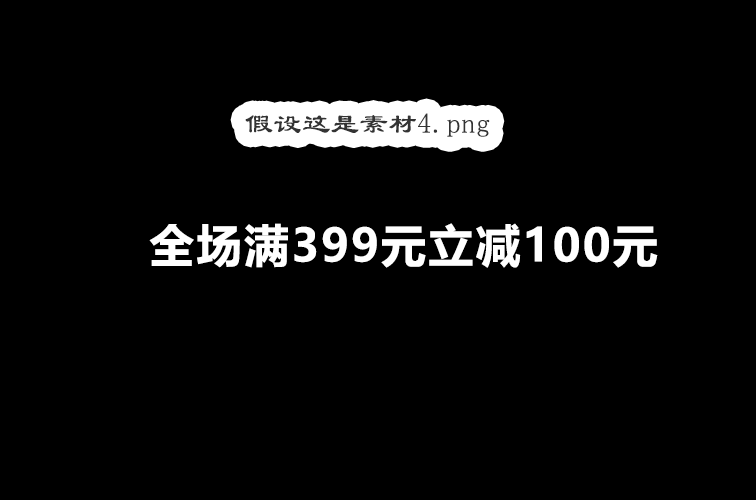
<style>
.page{position:relative;width:756px;height:500px;background:#000000}
.page>*{position:absolute;margin:0}
.t1{font:28px "LiSu";letter-spacing:0.025em;color:#333333}
.t2{font:45px "MicrosoftYaHei-Bold";letter-spacing:0.05em;color:#ffffff}
</style>
<div class="page">
<p class="t1" style="left:245px;top:113px;width:245px;height:24px">假设这是素材4.png</p>
<p class="t2" style="left:149px;top:223px;width:509px;height:45px">全场满399元立减100元</p>
</div>
